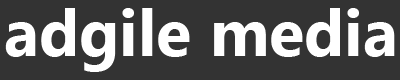
<style>
.page{position:relative;width:400px;height:80px;background:#333333}
.page>*{position:absolute;margin:0}
.t1{font:65px "MyanmarText-Bold";color:#ffffff}
</style>
<div class="page">
<p class="t1" style="left:5px;top:8px;width:390px;height:64px">adgile media</p>
</div>
